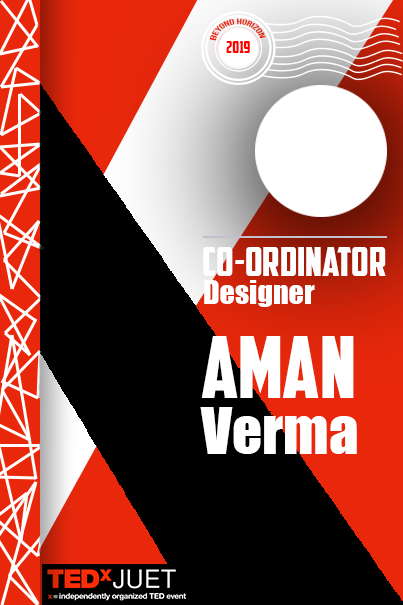
<style>
.page{position:relative;width:403px;height:605px;background:#000000}
.page>*{position:absolute;margin:0}
.t1{font:6.8px "BebasNeue-Regular";color:#e9280b;scale:1.14 1}
.t2{font:16.1px "AmericanCaptain";color:#ff0000}
.t3{font:40px "AmericanCaptain";color:#fffefe}
.t4{font:30px "Impact";color:#ffffff}
.t5{font:85px "AmericanCaptain";color:#ffffff}
.t6{font:59.1px "Impact";color:#ffffff}
</style>
<div class="page">
<p class="t1" style="left:209px;top:18px;width:57px;height:23px">BEYOND HORIZON</p>
<p class="t2" style="left:226px;top:41px;width:24px;height:12px">2019</p>
<p class="t3" style="left:203px;top:247px;width:183px;height:29px">co-ordinator</p>
<p class="t4" style="left:204px;top:280px;width:111px;height:27px">Designer</p>
<p class="t5" style="left:201px;top:336px;width:153px;height:62px">AMAN</p>
<p class="t6" style="left:200px;top:407px;width:157px;height:47px">Verma</p>
</div>
